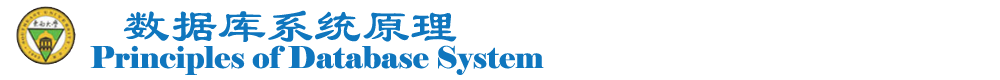
<style>
.page{position:relative;width:1000px;height:80px;background:#ffffff}
.page>*{position:absolute;margin:0}
.t1{font:48px "LiSu";color:#0f76be}
.t2{font:30px "Elephant-Regular";color:#0f76be}
</style>
<div class="page">
<p class="t1" style="left:123px;top:10px;width:334px;height:32px">数据库系统原理</p>
<p class="t2" style="left:90px;top:45px;width:454px;height:30px">Principles of Database System</p>
</div>
